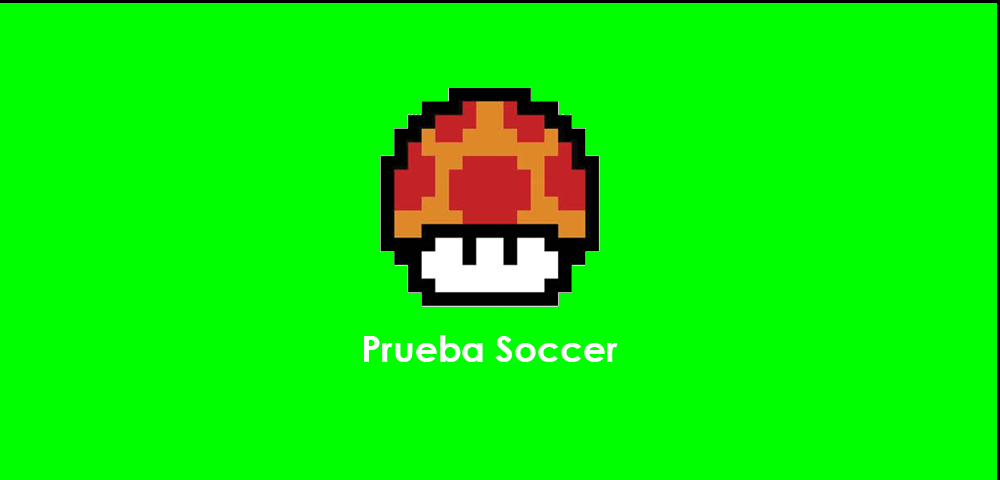
<style>
.page{position:relative;width:1000px;height:480px;background:#00ff00}
.page>*{position:absolute;margin:0}
.t1{font:36px "CenturyGothic-Bold";color:#fffdfd}
</style>
<div class="page">
<p class="t1" style="left:364px;top:335px;width:254px;height:27px">Prueba Soccer</p>
</div>
